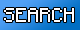
<style>
.page{position:relative;width:80px;height:30px}
.page>*{position:absolute;margin:0}
.t1{font:16px "Minecraft";color:#fffeff;font-variant:small-caps}
</style>
<div class="page">
<p class="t1" style="left:4px;top:8px;width:70px;height:14px">SEARCH</p>
</div>
